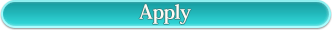
<style>
.page{position:relative;width:332px;height:30px}
.page>*{position:absolute;margin:0}
.t1{font:20px "HeiseiMinStd-W7";color:#fffaf4}
</style>
<div class="page">
<p class="t1" style="left:139px;top:4px;width:52px;height:20px">Apply</p>
</div>
